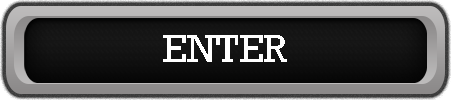
<style>
.page{position:relative;width:451px;height:100px}
.page>*{position:absolute;margin:0}
.t1{font:39.8px "Rockwell";color:#ffffff}
</style>
<div class="page">
<p class="t1" style="left:163px;top:35px;width:124px;height:27px">ENTER</p>
</div>
